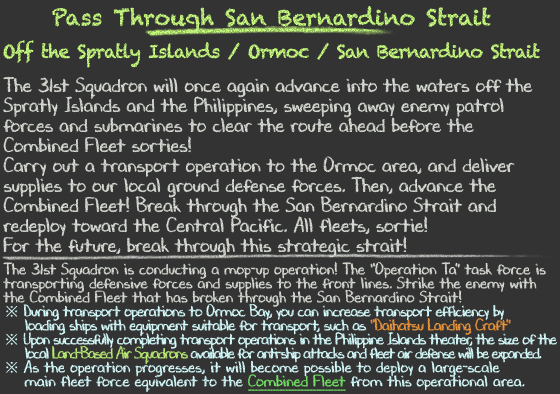
<style>
.page{position:relative;width:560px;height:394px;background:#333333}
.page>*{position:absolute;margin:0}
.t1{font:18px/36px "Chalkduster";letter-spacing:-0.04em}
.t2{font:22px/36px "Chalkduster"}
.t3{font:20px/20px "DJBChalkItUp";color:#d9ded6}
.t4{font:20px/10px "DJBChalkItUp";color:#d9ded6}
.t5{font:16px/14px "DJBChalkItUp";color:#d9ded6}
.t6{font:16px/14px "TimesNewRomanPSMT";color:#d7feff}
.t7{font:16px/14px "DJBChalkItUp";letter-spacing:-0.04em;color:#d7feff}
.t8{font:16px/14px "DJBChalkItUp";letter-spacing:-0.04em;color:#ee963b}
.t9{font:16px/14px "DJBChalkItUp";letter-spacing:-0.06em;color:#d7feff}
.t10{font:16px/14px "DJBChalkItUp";letter-spacing:-0.08em;color:#d7feff}
.t11{font:16px/14px "DJBChalkItUp";letter-spacing:-0.08em;color:#bced77}
.t12{font:16px/14px "DJBChalkItUp";color:#d7feff}
.t13{font:16px/14px "DJBChalkItUp";color:#74e465;text-decoration:underline}
</style>
<div class="page">
<p class="t1" style="left:3px;top:6px;width:537px;height:62px;text-align:center"><span class="t2">Pass Through San Bernardino Strait<br></span>Off the Spratly Islands / Ormoc / San Bernardino Strait</p>
<p class="t3" style="left:3px;top:76px;width:554px;height:316px">The 31st Squadron will once again advance into the waters off the<br>Spratly Islands and the Philippines, sweeping away enemy patrol<br>forces and submarines to clear the route ahead before the<br>Combined Fleet sorties!<br>Carry out a transport operation to the Ormoc area, and deliver<br>supplies to our local ground defense forces. Then, advance the<br>Combined Fleet! Break through the San Bernardino Strait and<br>redeploy toward the Central Pacific. All fleets, sortie!<br><span class="t4">For the future, break through this strategic strait!<br><br></span><span class="t5">The 31st Squadron is conducting a mop-up operation! The “Operation Ta” task force is<br>transporting defensive forces and supplies to the front lines. Strike the enemy with<br>the Combined Fleet that has broken through the San Bernardino Strait!<br></span><span class="t6">※ </span><span class="t7">During transport operations to Ormoc Bay, you can increase transport efficiency by<br>　 loading ships with equipment suitable for transport, such as </span><span class="t8">“Daihatsu Landing Craft”<br></span><span class="t6">※ </span><span class="t9">Upon successfully completing transport operations in the Philippine Islands theater, the size of the<br>　 </span><span class="t10">local </span><span class="t11">Land-Based Air Squadrons</span><span class="t10"> available for anti-ship attacks and fleet air defense will be expanded.<br></span><span class="t6">※ </span><span class="t12">As the operation progresses, it will become possible to deploy a large-scale<br>　 main fleet force equivalent to the </span><span class="t13">Combined Fleet</span><span class="t12"> from this operational area.</span></p>
</div>
